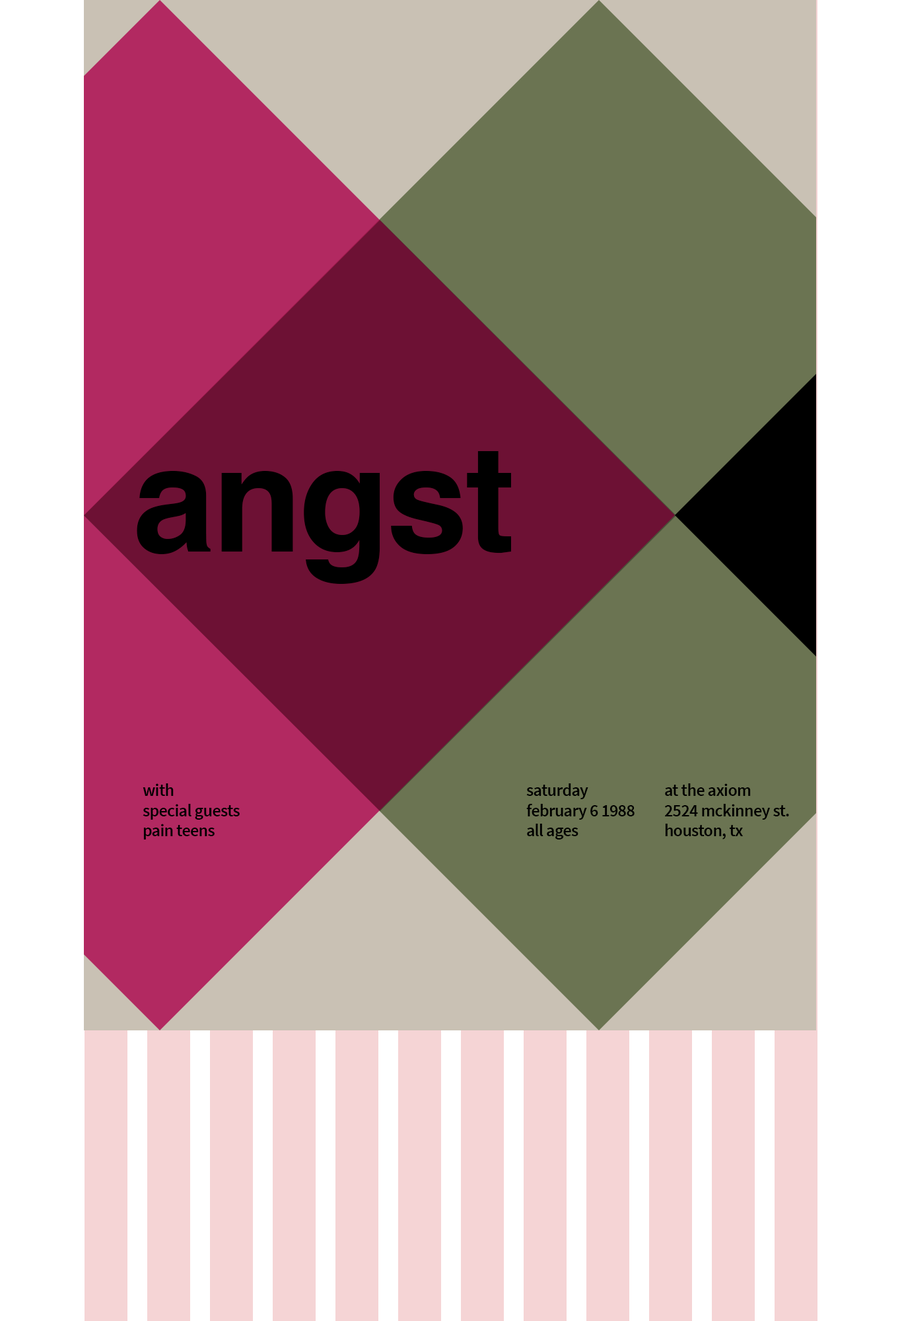
<style>
.page{position:relative;width:902px;height:1321px;background:#ffffff}
.page>*{position:absolute;margin:0}
.t1{font:147.7px "Helvetica-Bold";letter-spacing:-0.02em;color:#000000}
.t2{font:17px "SourceSansPro-SemiBold";letter-spacing:-0.02em;color:#000000}
</style>
<div class="page">
<p class="t1" style="left:137px;top:451px;width:374px;height:133px">angst</p>
<p class="t2" style="left:143px;top:784px;width:97px;height:56px">with<br>special guests<br>pain teens</p>
<p class="t2" style="left:527px;top:784px;width:108px;height:56px">saturday<br>february 6 1988<br>all ages</p>
<p class="t2" style="left:665px;top:784px;width:124px;height:56px">at the axiom<br>2524 mckinney st.<br>houston, tx</p>
</div>
